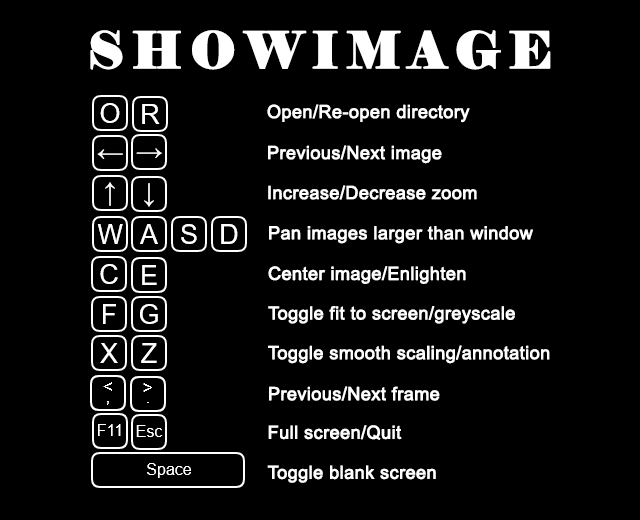
<style>
.page{position:relative;width:640px;height:520px;background:#000000}
.page>*{position:absolute;margin:0}
.t1{font:50px "Elephant-Regular";letter-spacing:0.14em;color:#ffffff;font-weight:bold}
.t2{font:18px "ArialMT";color:#ffffff;font-weight:bold}
</style>
<div class="page">
<p class="t1" style="left:90px;top:30px;width:461px;height:40px">SHOWIMAGE</p>
<p class="t2" style="left:267px;top:104px;width:203px;height:19px">Open/Re-open directory</p>
<p class="t2" style="left:268px;top:145px;width:174px;height:19px">Previous/Next image</p>
<p class="t2" style="left:268px;top:185px;width:209px;height:15px">Increase/Decrease zoom</p>
<p class="t2" style="left:269px;top:226px;width:264px;height:18px">Pan images larger than window</p>
<p class="t2" style="left:268px;top:266px;width:198px;height:18px">Center image/Enlighten</p>
<p class="t2" style="left:268px;top:306px;width:247px;height:18px">Toggle fit to screen/greyscale</p>
<p class="t2" style="left:268px;top:345px;width:282px;height:19px">Toggle smooth scaling/annotation</p>
<p class="t2" style="left:269px;top:386px;width:171px;height:15px">Previous/Next frame</p>
<p class="t2" style="left:268px;top:425px;width:134px;height:15px">Full screen/Quit</p>
<p class="t2" style="left:267px;top:465px;width:169px;height:18px">Toggle blank screen</p>
</div>
